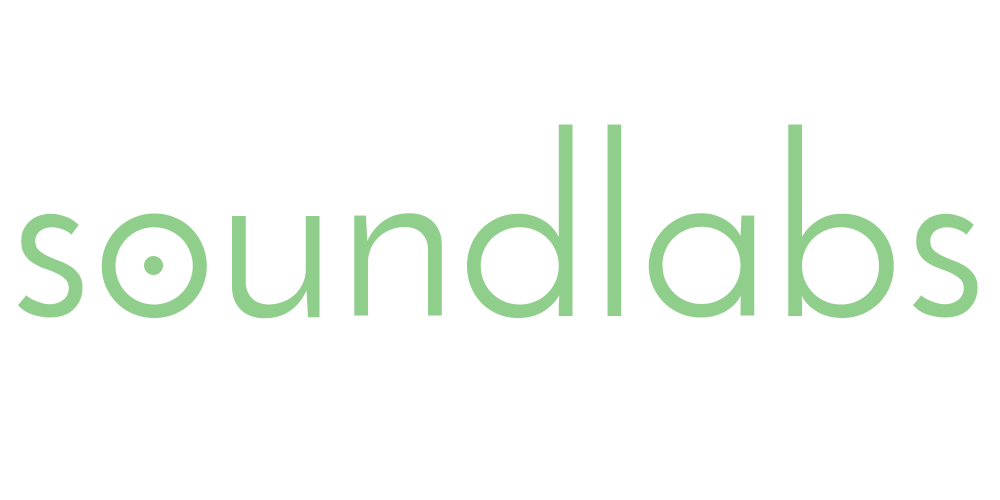
<style>
.page{position:relative;width:1000px;height:500px;background:#ffffff}
.page>*{position:absolute;margin:0}
.t1{font:250px "JosefinSans";color:#90cf8b}
</style>
<div class="page">
<p class="t1" style="left:18px;top:124px;width:960px;height:195px">soundlabs</p>
</div>
